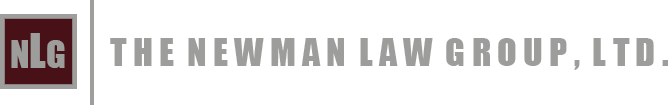
<style>
.page{position:relative;width:668px;height:105px;background:#ffffff}
.page>*{position:absolute;margin:0}
.t1{font:36px "Impact";color:#9d9d9b}
.t2{font:44px "Impact";color:#9d9d9b}
</style>
<div class="page">
<p class="t1" style="left:11px;top:33px;width:54px;height:35px">N<span class="t2">L</span>G</p>
<p class="t1" style="left:110px;top:38px;width:558px;height:32px">T H E  N E W M A N  L A W  G R O U P ,  L T D .</p>
</div>
